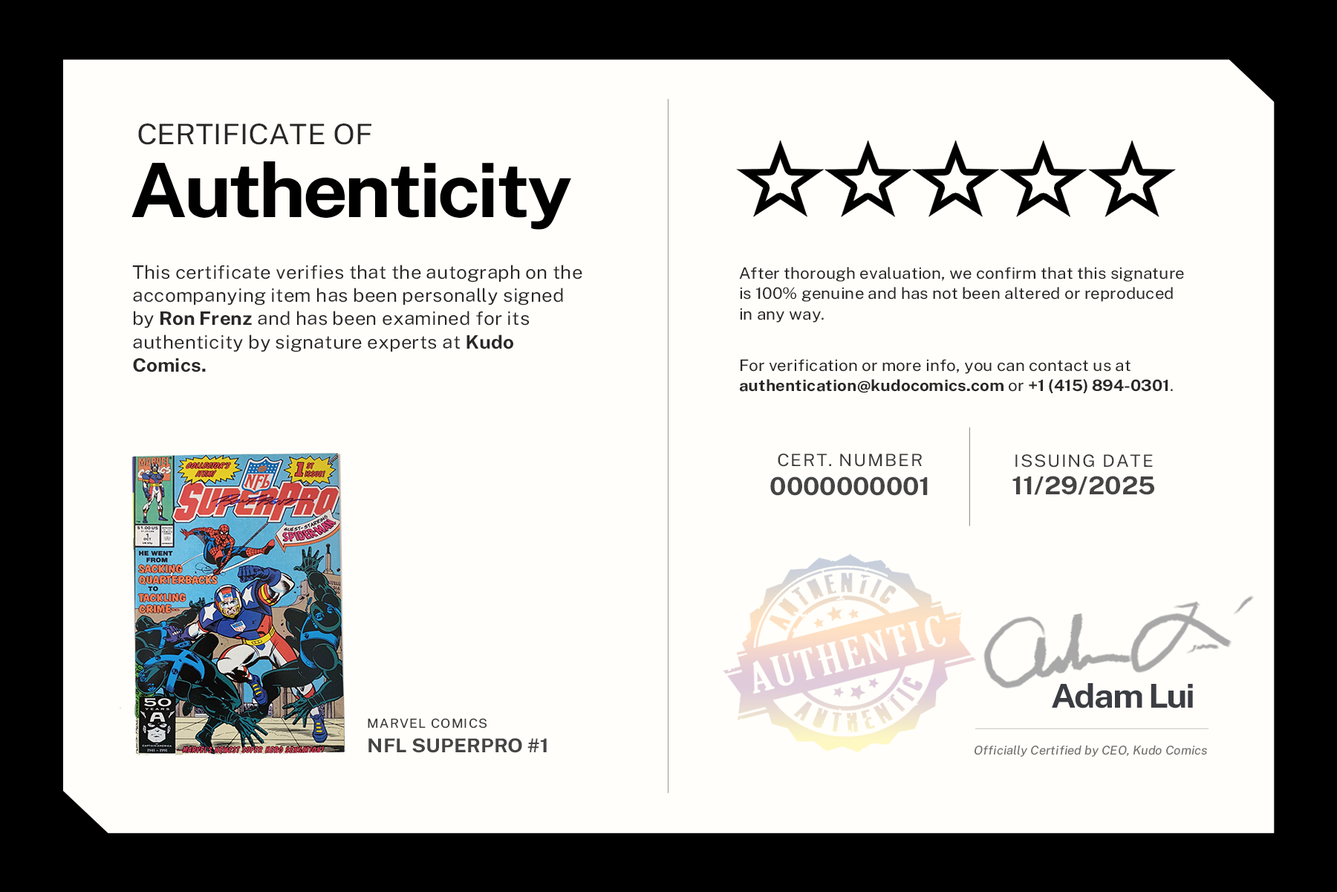
<style>
.page{position:relative;width:1337px;height:892px;background:#fffefa}
.page>*{position:absolute;margin:0}
.t1{font:28.3px "PublicSans-Regular";letter-spacing:-0.003em;color:#2b2627;scale:1.06 1}
.t2{font:28.3px "PublicSans-Regular";color:#2b2627;scale:1.06 1}
.t3{font:28.3px "PublicSans-Regular";letter-spacing:-0.004em;color:#2b2627;scale:1.06 1}
.t4{font:28.3px "PublicSans-Regular";letter-spacing:0.003em;color:#2b2627;scale:1.06 1}
.t5{font:28.3px "PublicSans-Regular";letter-spacing:0.002em;color:#2b2627;scale:1.06 1}
.t6{font:28.3px "PublicSans-Regular";letter-spacing:-0.002em;color:#2b2627;scale:1.06 1}
.t7{font:28.3px "PublicSans-Regular";letter-spacing:0.004em;color:#2b2627;scale:1.06 1}
.t8{font:74.9px "PublicSans-Bold";letter-spacing:-0.045em;color:#000000;scale:1.06 1}
.t9{font:18.4px/23.3px "PublicSans-Regular";color:#2b2627;scale:1.06 1}
.t10{font:18.4px/23.3px "PublicSans-Bold";color:#2b2627;scale:1.06 1}
.t11{font:15.7px/20.5px "PublicSans-Regular";color:#2b2627;scale:1.06 1}
.t12{font:15.7px/20.5px "PublicSans-Bold";color:#2b2627;scale:1.06 1}
.t13{font:17px "PublicSans-Regular";letter-spacing:0.069em;color:#393939;scale:1.06 1}
.t14{font:24.8px "PublicSans-Bold";color:#444444;scale:1.06 1}
.t15{font:32.9px "PublicSans-Bold";letter-spacing:-0.046em;color:#3b3d43;scale:1.06 1}
.t16{font:12.5px "PublicSans-Regular";letter-spacing:0.069em;color:#393939;scale:1.06 1}
.t17{font:19.1px "PublicSans-Bold";color:#444444;scale:1.06 1}
.t18{font:12px "PublicSans-Italic";color:#71716f;scale:1.06 1}
</style>
<div class="page">
<p class="t1" style="left:138px;top:123px;width:234px;height:22px">C<span class="t2">E</span><span class="t3">R</span><span class="t4">T</span><span class="t2">I</span><span class="t5">F</span><span class="t2">I</span><span class="t3">C</span><span class="t6">A</span><span class="t4">T</span><span class="t2">E </span><span class="t7">O</span><span class="t2">F</span></p>
<p class="t8" style="left:132px;top:161px;width:439px;height:69px">Authenticity</p>
<p class="t9" style="left:132px;top:265px;width:451px;height:107px">This certificate verifies that the autograph on the accompanying item has been personally signed by <span class="t10">Ron Frenz </span>and has been examined for its authenticity by signature experts at <span class="t10">Kudo Comics.</span></p>
<p class="t11" style="left:739px;top:267px;width:445px;height:55px">After thorough evaluation, we confirm that this signature is 100% genuine and has not been altered or reproduced in any way.</p>
<p class="t11" style="left:740px;top:359px;width:433px;height:34px">For verification or more info, you can contact us at <span class="t12">authentication@kudocomics.com </span>or <span class="t12">+1 (415) 894-0301</span>.</p>
<p class="t13" style="left:778px;top:453px;width:144px;height:14px">CERT. NUMBER</p>
<p class="t13" style="left:1016px;top:454px;width:137px;height:13px">ISSUING DATE</p>
<p class="t14" style="left:770px;top:476px;width:158px;height:20px">0000000001</p>
<p class="t14" style="left:1013px;top:476px;width:142px;height:19px">11/29/2025</p>
<p class="t15" style="left:1052px;top:683px;width:141px;height:25px">Adam Lui</p>
<p class="t16" style="left:368px;top:718px;width:119px;height:10px">MARVEL COMICS</p>
<p class="t17" style="left:369px;top:738px;width:178px;height:15px">NFL SUPERPRO #1</p>
<p class="t18" style="left:975px;top:744px;width:232px;height:12px">Officially Certified by CEO, Kudo Comics</p>
</div>
